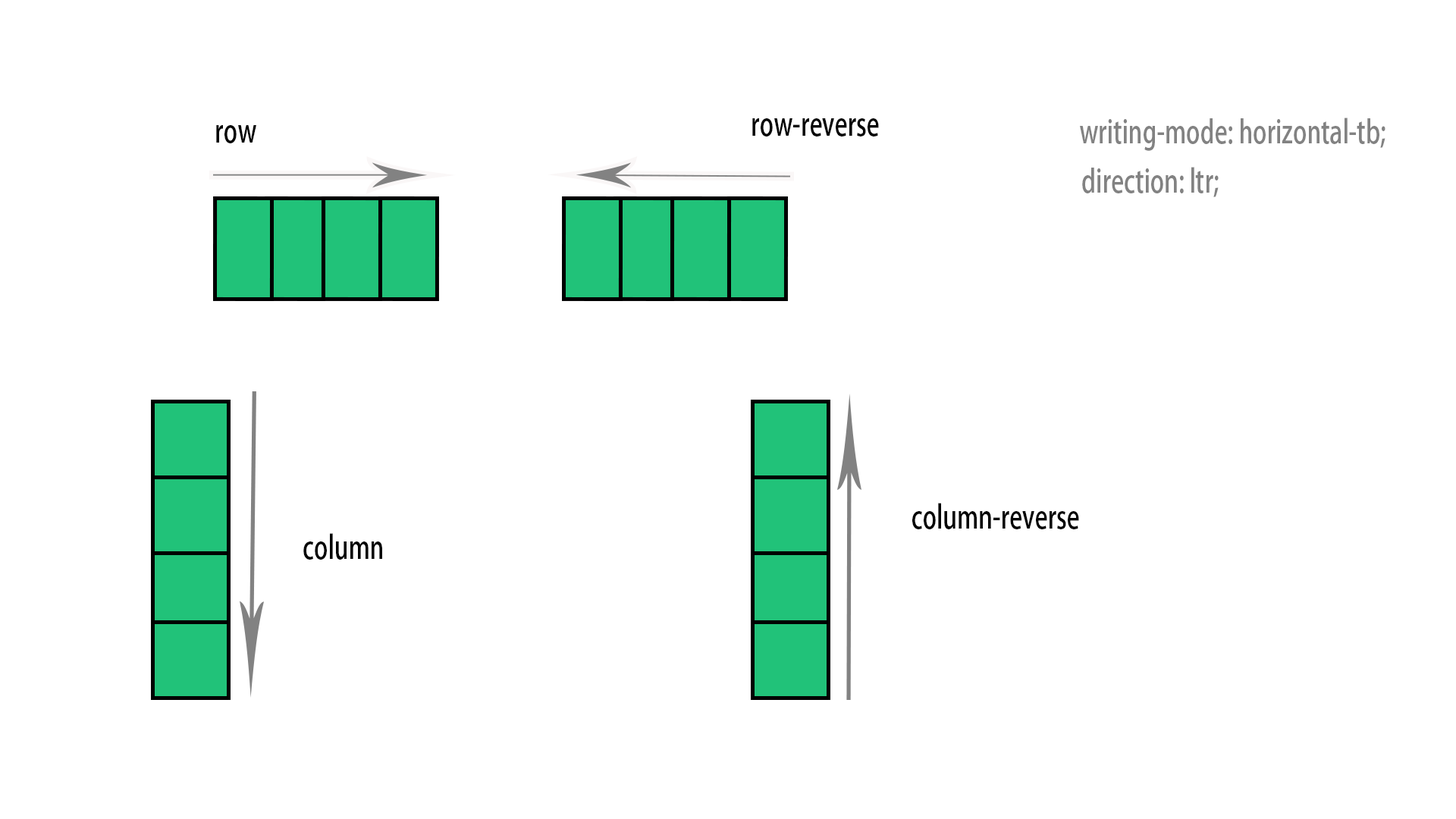
<style>
.page{position:relative;width:1456px;height:819px;background:#ffffff}
.page>*{position:absolute;margin:0}
.t1{font:31.6px "AdobeHeitiStd-Regular";color:#030303;scale:0.75 1}
.t2{font:31.6px "AdobeHeitiStd-Regular";color:#828282;scale:0.75 1}
</style>
<div class="page">
<p class="t1" style="left:216px;top:125px;width:40px;height:18px">row</p>
<p class="t1" style="left:752px;top:118px;width:127px;height:18px">row-reverse</p>
<p class="t2" style="left:1080px;top:118px;width:305px;height:33px">writing-mode: horizontal-tb;</p>
<p class="t2" style="left:1082px;top:167px;width:137px;height:30px">direction: ltr;</p>
<p class="t1" style="left:912px;top:503px;width:167px;height:26px">column-reverse</p>
<p class="t1" style="left:303px;top:533px;width:79px;height:27px">column</p>
</div>
